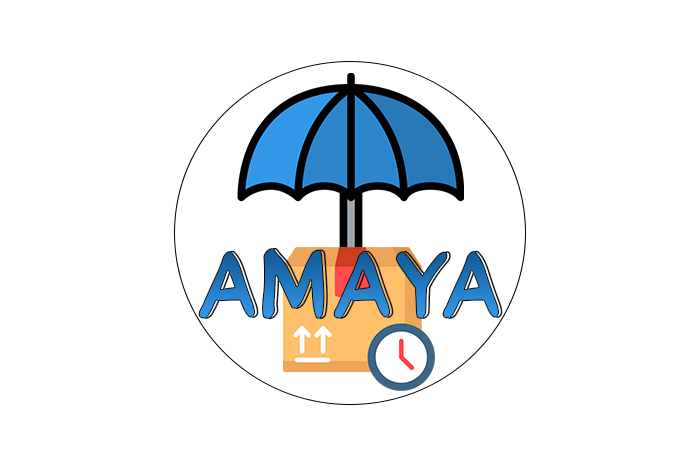
<style>
.page{position:relative;width:700px;height:467px;background:#ffffff}
.page>*{position:absolute;margin:0}
.t1{font:105.2px "DominoRegular";letter-spacing:0.025em}
.t2{font:105.2px "DominoRegular";letter-spacing:0.003em}
</style>
<div class="page">
<p class="t1" style="left:198px;top:247px;width:305px;height:73px"><span class="t2">A</span>MA<span class="t2">YA</span></p>
</div>
